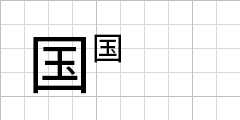
<style>
.page{position:relative;width:240px;height:120px;background:#ffffff}
.page>*{position:absolute;margin:0}
.t1{font:64px "NotoSansCJKjp-Regular";color:#000000}
.t2{font:32px "NotoSansCJKjp-Regular";color:#000000}
</style>
<div class="page">
<p class="t1" style="left:33px;top:34px;width:88px;height:60px">国<span class="t2">国</span></p>
</div>
